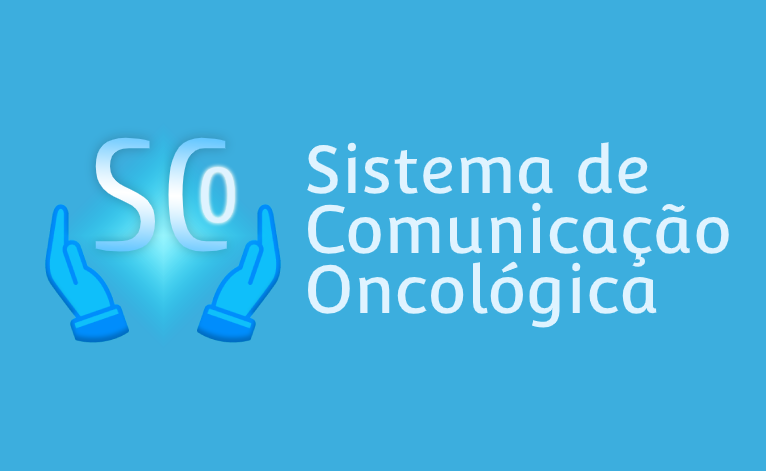
<style>
.page{position:relative;width:766px;height:471px;background:#3caede}
.page>*{position:absolute;margin:0}
.t1{font:157.9px "Cuprum-Regular"}
.t2{font:66px/60px "Convergence-Regular";color:#dff3ff}
.t3{font:77.4px "Cuprum-Regular";color:#dff3ff}
</style>
<div class="page">
<p class="t1" style="left:95px;top:137px;width:132px;height:115px">SC</p>
<p class="t2" style="left:307px;top:142px;width:422px;height:186px">Sistema de <br>Comunicação<br>Oncológica</p>
<p class="t3" style="left:201px;top:167px;width:34px;height:56px">O</p>
</div>
